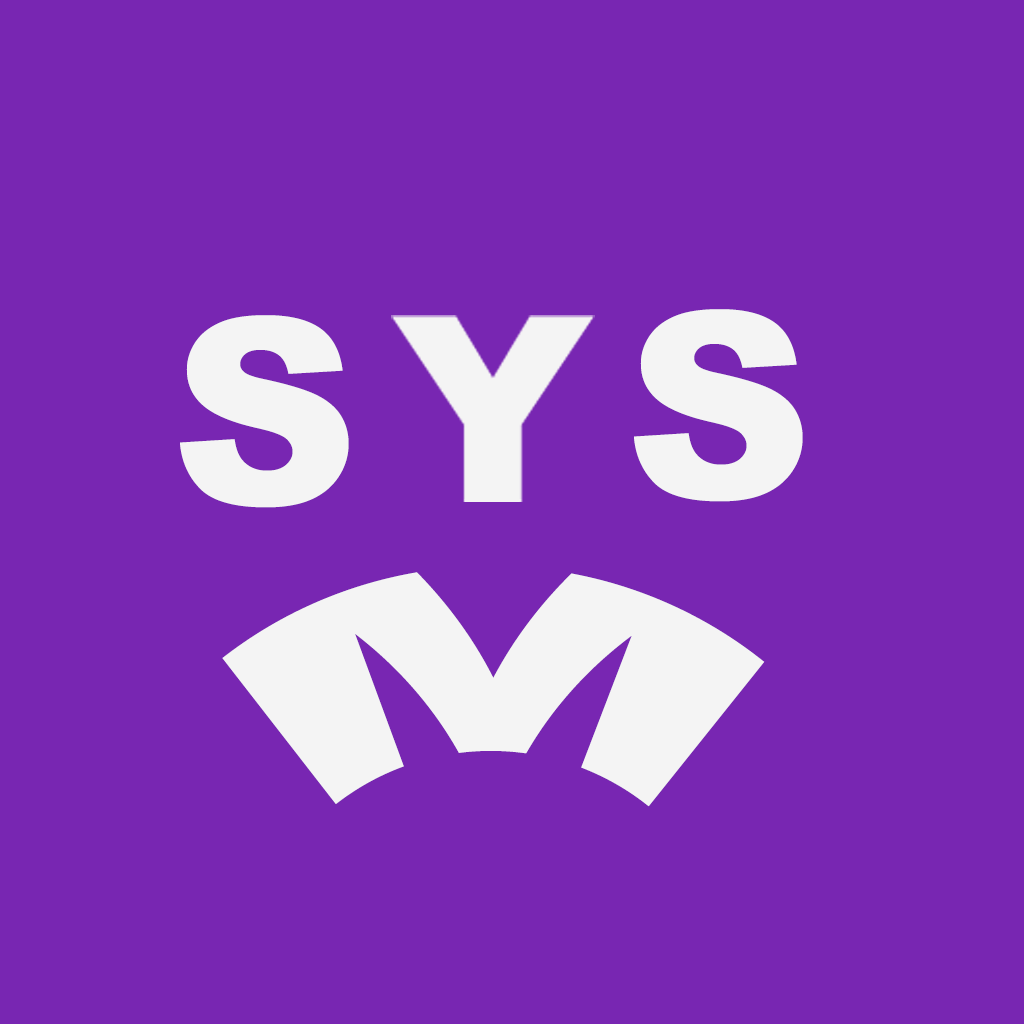
<style>
.page{position:relative;width:1024px;height:1024px;background:#7826b2}
.page>*{position:absolute;margin:0}
.t1{font:259.3px "Arial-Black";color:#f4f4f4}
</style>
<div class="page">
<p class="t1" style="left:180px;top:315px;width:169px;height:193px">S</p>
<p class="t1" style="left:634px;top:309px;width:169px;height:193px">S</p>
<p class="t1" style="left:222px;top:572px;width:543px;height:235px">M</p>
</div>
